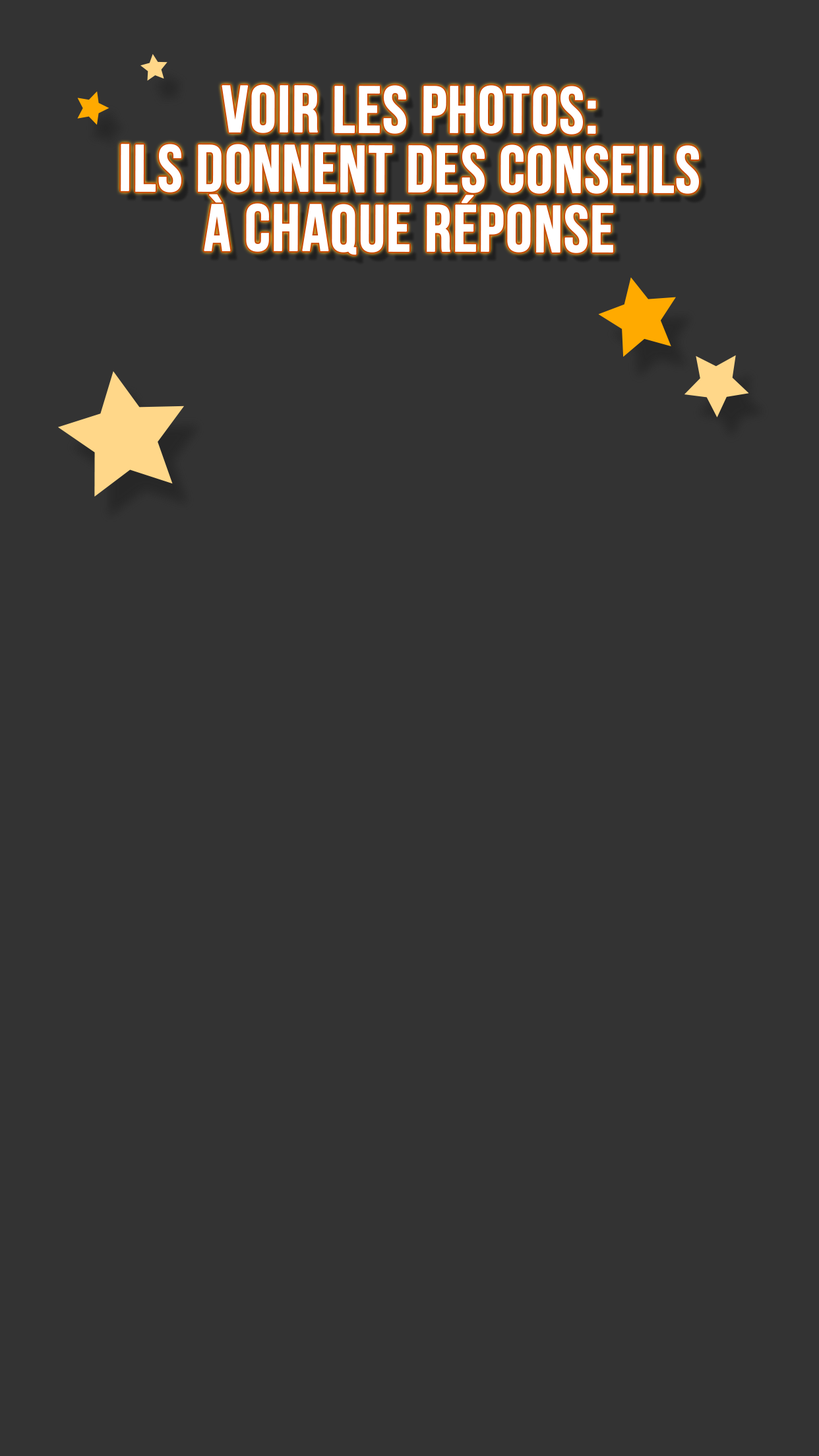
<style>
.page{position:relative;width:819px;height:1456px;background:#333333}
.page>*{position:absolute;margin:0}
.t1{font:65.9px/59.3px "BebasNeueBold";color:#ffffff;text-transform:uppercase;font-weight:bold}
</style>
<div class="page">
<p class="t1" style="left:121px;top:84px;width:578px;height:171px;text-align:center">Voir les photos:<br>Ils donnent des conseils<br>à chaque réponse</p>
</div>
